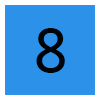
<style>
.page{position:relative;width:100px;height:100px;background:#2b91e9}
.page>*{position:absolute;margin:0}
.t1{font:60px "MicrosoftSansSerif";color:#000407}
</style>
<div class="page">
<p class="t1" style="left:36px;top:28px;width:29px;height:45px">8</p>
</div>
